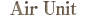
<style>
.page{position:relative;width:87px;height:19px;background:#ffffff}
.page>*{position:absolute;margin:0}
.t1{font:18px "RyuminPro-ExBold";letter-spacing:-0.04em}
</style>
<div class="page">
<p class="t1" style="left:10px;top:1px;width:67px;height:14px">Air Unit</p>
</div>
